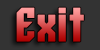
<style>
.page{position:relative;width:100px;height:50px;background:#333333}
.page>*{position:absolute;margin:0}
.t1{font:47.9px "Whitestone-Bold"}
</style>
<div class="page">
<p class="t1" style="left:16px;top:7px;width:68px;height:35px">Exit</p>
</div>
